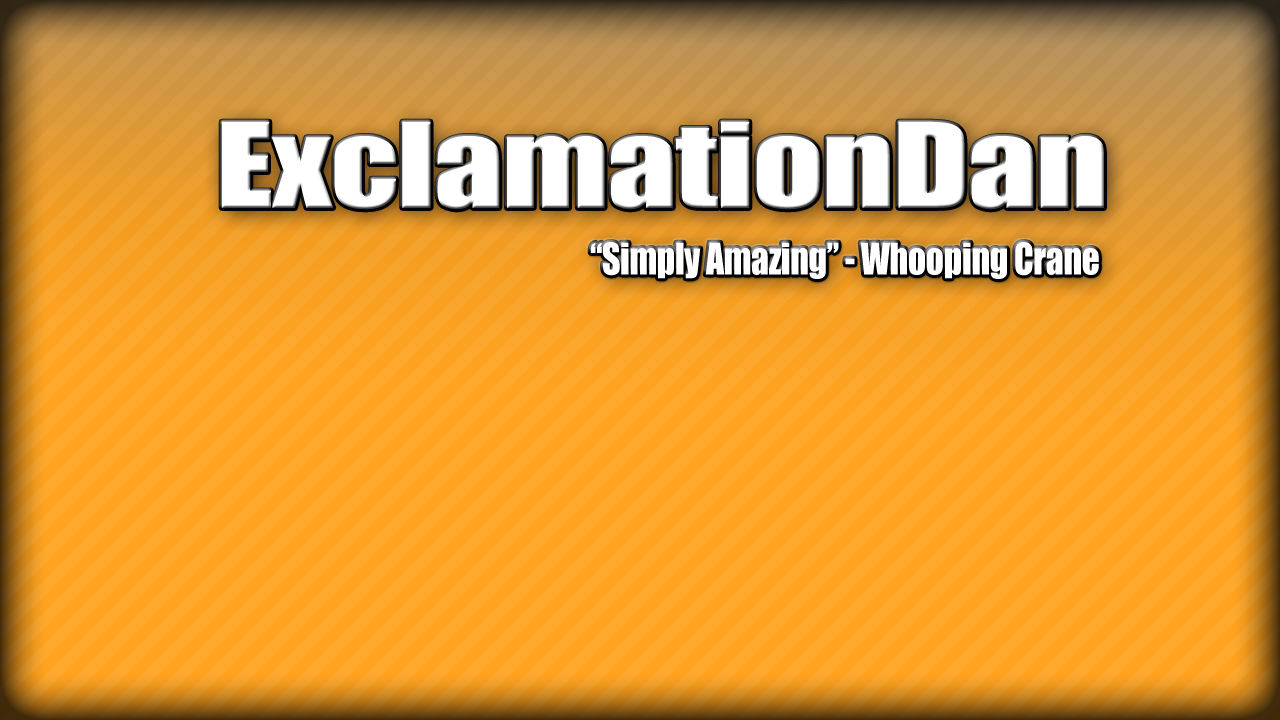
<style>
.page{position:relative;width:1280px;height:720px}
.page>*{position:absolute;margin:0}
.t1{font:108.7px "Impact";letter-spacing:-0.01em;color:#ffffff;scale:1.27 1}
.t2{font:40.2px "Impact";letter-spacing:-0.01em;color:#ffffff;scale:0.89 1}
</style>
<div class="page">
<p class="t1" style="left:221px;top:121px;width:883px;height:89px">ExclamationDan</p>
<p class="t2" style="left:590px;top:242px;width:509px;height:37px">“Simply Amazing” - Whooping Crane</p>
</div>
